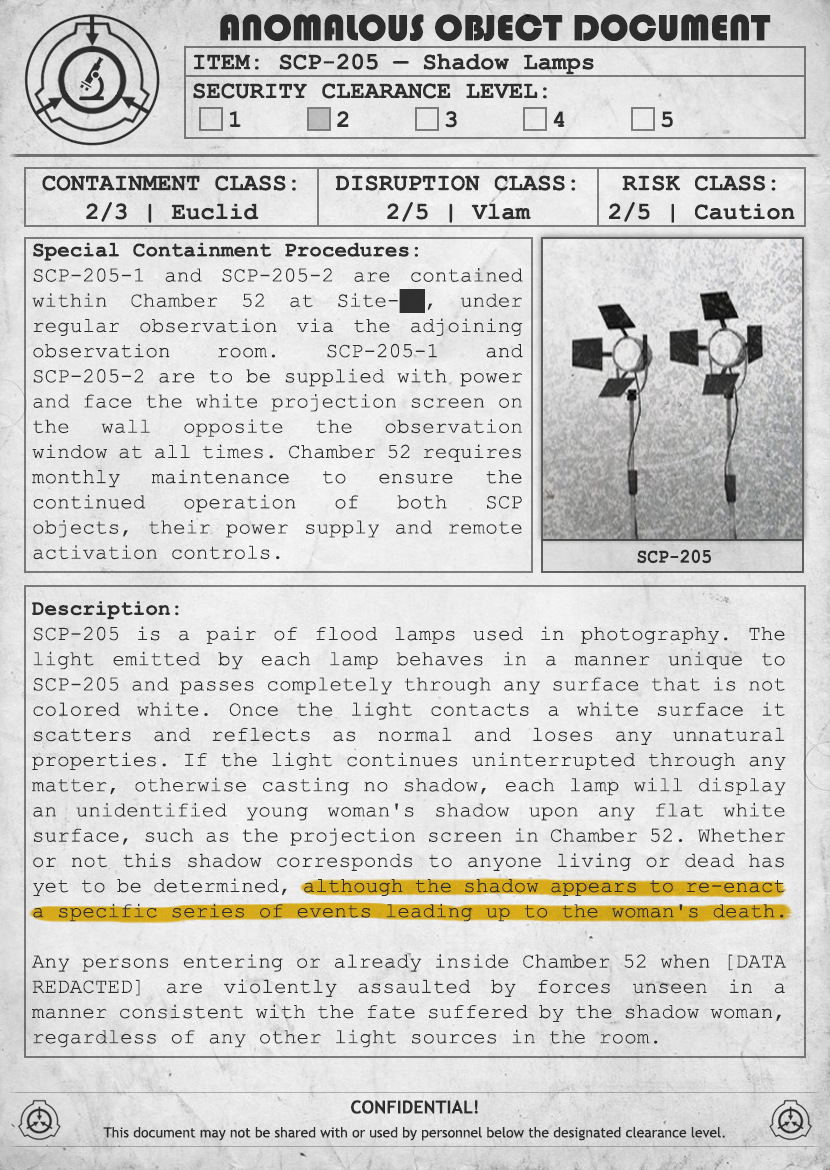
<style>
.page{position:relative;width:830px;height:1170px}
.page>*{position:absolute;margin:0}
.t1{font:38px "Bauhaus93";color:#333333;text-transform:uppercase}
.t2{font:24px "CourierNewPS-BoldMT";color:#333333}
.t3{font:24px "CourierNewPS-BoldMT";color:#333333;text-transform:uppercase}
.t4{font:21px "CourierNewPSMT";color:#333333}
.t5{font:21px "CourierNewPS-BoldMT";color:#333333}
.t6{font:20.1px "CourierNewPS-BoldMT";color:#333333;scale:0.9 1}
.t7{font:14px/24px "TrebuchetMS";color:#333333}
.t8{font:18px/24px "TrebuchetMS-Bold";color:#333333}
</style>
<div class="page">
<p class="t1" style="left:220px;top:14px;width:551px;height:27px">anomalous object document</p>
<p class="t2" style="left:193px;top:53px;width:480px;height:75px">ITEM: SCP-205 — Shadow Lamps<br><span class="t3">Security CLEARANCE LEVEL:</span> <br> 1   2   3   4   5</p>
<p class="t2" style="left:42px;top:175px;width:254px;height:48px;text-align:center">CONTAINMENT CLASS:<br>2/3 | Euclid</p>
<p class="t2" style="left:335px;top:175px;width:241px;height:48px;text-align:center">DISRUPTION CLASS:<br>2/5 | Vlam</p>
<p class="t2" style="left:609px;top:175px;width:186px;height:48px;text-align:center">RISK CLASS:<br>2/5 | Caution</p>
<p class="t4" style="left:32px;top:242px;width:491px;height:318px;text-align:justify"><span class="t5">Special Containment Procedures:<br></span>SCP-205-1 and SCP-205-2 are contained within Chamber 52 at Site-██, under regular observation via the adjoining observation room. SCP-205-1 and SCP-205-2 are to be supplied with power and face the white projection screen on the wall opposite the observation window at all times. Chamber 52 requires monthly maintenance to ensure the continued operation of both SCP objects, their power supply and remote activation controls.</p>
<p class="t6" style="left:637px;top:549px;width:74px;height:15px">SCP-205</p>
<p class="t4" style="left:32px;top:601px;width:754px;height:447px;text-align:justify"><span class="t5">Description:<br></span>SCP-205 is a pair of flood lamps used in photography. The light emitted by each lamp behaves in a manner unique to SCP-205 and passes completely through any surface that is not colored white. Once the light contacts a white surface it scatters and reflects as normal and loses any unnatural properties. If the light continues uninterrupted through any matter, otherwise casting no shadow, each lamp will display an unidentified young woman's shadow upon any flat white surface, such as the projection screen in Chamber 52. Whether or not this shadow corresponds to anyone living or dead has yet to be determined, although the shadow appears to re-enact a specific series of events leading up to the woman's death.<br><br>Any persons entering or already inside Chamber 52 when [DATA REDACTED] are violently assaulted by forces unseen in a manner consistent with the fate suffered by the shadow woman, regardless of any other light sources in the room.</p>
<p class="t7" style="left:103px;top:1100px;width:622px;height:41px;text-align:center"><span class="t8">CONFIDENTIAL!<br></span>This document may not be shared with or used by personnel below the designated clearance level.</p>
</div>
